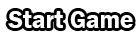
<style>
.page{position:relative;width:140px;height:40px;background:#ffffff}
.page>*{position:absolute;margin:0}
.t1{font:25px "FranklinGothic-Demi";color:#ffffff}
</style>
<div class="page">
<p class="t1" style="left:8px;top:11px;width:125px;height:17px">Start Game</p>
</div>
